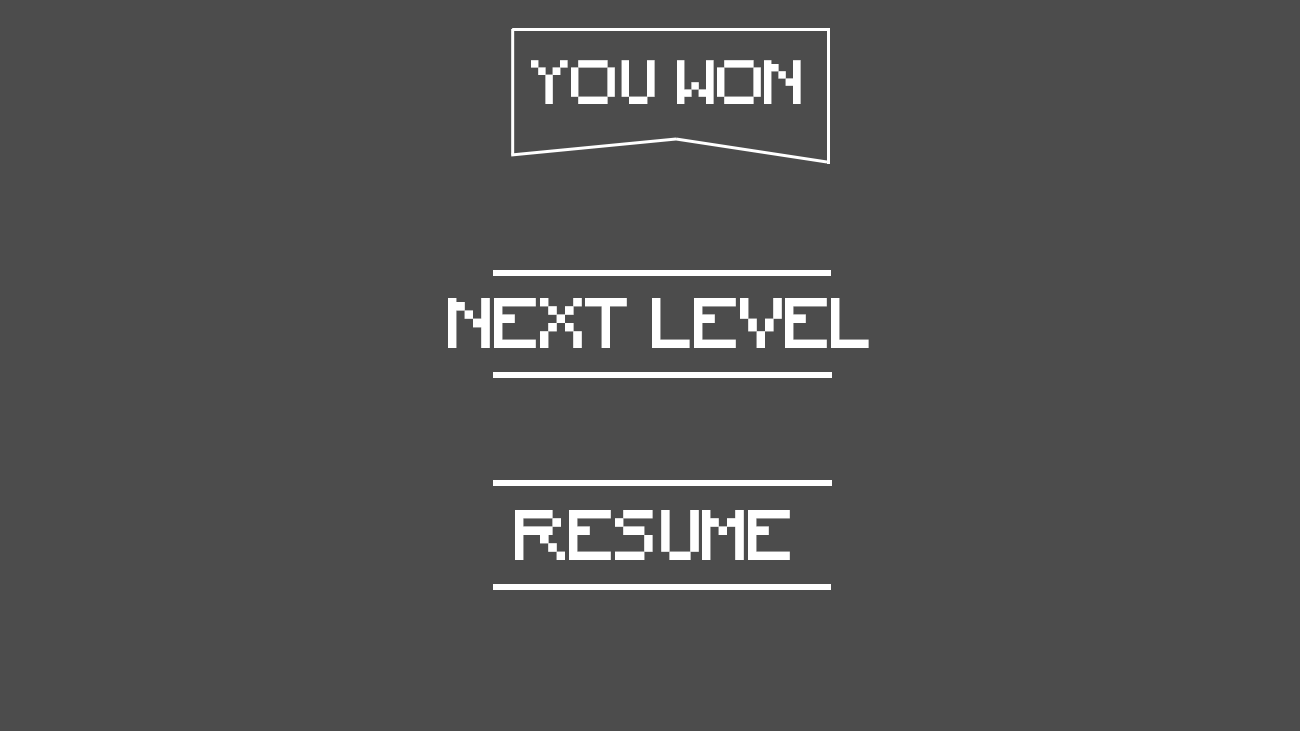
<style>
.page{position:relative;width:1300px;height:731px;background:#4c4c4c}
.page>*{position:absolute;margin:0}
.t1{font:58.3px "Minecraft";color:#ffffff}
.t2{font:66.7px "Minecraft";color:#ffffff}
</style>
<div class="page">
<p class="t1" style="left:531px;top:60px;width:270px;height:44px">YOU WON</p>
<p class="t2" style="left:448px;top:298px;width:421px;height:50px">NEXT LEVEL</p>
<p class="t2" style="left:515px;top:510px;width:275px;height:50px">RESUME</p>
</div>
